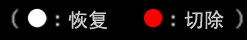
<style>
.page{position:relative;width:247px;height:40px;background:#000000}
.page>*{position:absolute;margin:0}
.t1{font:20px "SimHei";color:#cccccc}
</style>
<div class="page">
<p class="t1" style="left:68px;top:10px;width:40px;height:20px">恢复</p>
<p class="t1" style="left:184px;top:10px;width:40px;height:20px">切除</p>
</div>
